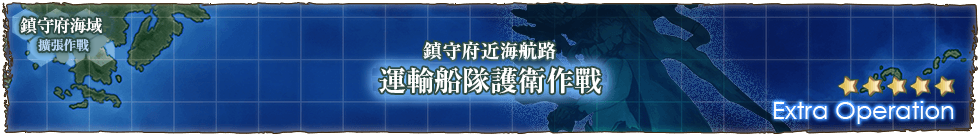
<style>
.page{position:relative;width:980px;height:136px}
.page>*{position:absolute;margin:0}
.t1{font:17px/22px "RyuminPr6N-ExBold";letter-spacing:-0.04em;color:#ffffff}
.t2{font:13px/22px "RyuminPr6N-ExBold";letter-spacing:-0.04em;color:#b9d7f5}
.t3{font:19px "RyuminPro-ExBold";color:#ffffff}
.t4{font:28px "RyuminPro-ExBold";color:#ffffff}
</style>
<div class="page">
<p class="t1" style="left:20px;top:17px;width:82px;height:35px">鎮守府海域 <br>　　　<span class="t2">擴張作戰</span></p>
<p class="t3" style="left:423px;top:41px;width:133px;height:19px">鎮守府近海航路</p>
<p class="t4" style="left:379px;top:67px;width:223px;height:27px">運輸船隊護衛作戰</p>
</div>
